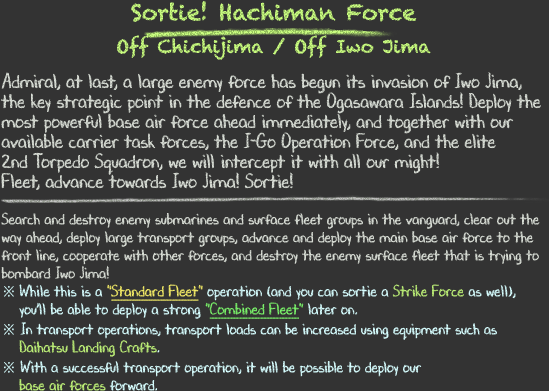
<style>
.page{position:relative;width:549px;height:391px;background:#333333}
.page>*{position:absolute;margin:0}
.t1{font:18px/36px "Chalkduster"}
.t2{font:22px/36px "Chalkduster"}
.t3{font:20px/20px "DJBChalkItUp";color:#d9ded6;scale:0.9 1}
.t4{font:16px/18px "DJBChalkItUp";color:#d9ded6;scale:0.9 1}
.t5{font:16px/18px "TimesNewRomanPSMT";color:#d7feff;scale:0.9 1}
.t6{font:16px/18px "DJBChalkItUp";color:#d7feff;scale:0.9 1}
.t7{font:16px/18px "DJBChalkItUp";color:#f5ed68;scale:0.9 1}
.t8{font:16px/18px "DJBChalkItUp";color:#f5ed68;text-decoration:underline;scale:0.9 1}
.t9{font:16px/18px "DJBChalkItUp";color:#bdef78;scale:0.9 1}
.t10{font:16px/20px "DJBChalkItUp";color:#d7feff;scale:0.9 1}
.t11{font:16px/20px "DJBChalkItUp";color:#7bf26b;scale:0.9 1}
.t12{font:16px/20px "DJBChalkItUp";color:#7bf26b;text-decoration:underline;scale:0.9 1}
.t13{font:16px/20px "DJBChalkItUp";color:#bdef78;scale:0.9 1}
</style>
<div class="page">
<p class="t1" style="left:117px;top:1px;width:314px;height:59px;text-align:center"><span class="t2">Sortie! Hachiman Force<br></span>Off Chichijima / Off Iwo Jima</p>
<p class="t3" style="left:1px;top:72px;width:540px;height:319px">Admiral, at last, a large enemy force has begun its invasion of Iwo Jima,<br>the key strategic point in the defence of the Ogasawara Islands! Deploy the<br>most powerful base air force ahead immediately, and together with our<br>available carrier task forces, the I-Go Operation Force, and the elite<br>2nd Torpedo Squadron, we will intercept it with all our might!<br>Fleet, advance towards Iwo Jima! Sortie!<br><br><span class="t4">Search and destroy enemy submarines and surface fleet groups in the vanguard, clear out the<br>way ahead, deploy large transport groups, advance and deploy the main base air force to the<br>front line, cooperate with other forces, and destroy the enemy surface fleet that is trying to<br>bombard Iwo Jima!<br></span><span class="t5">※ </span><span class="t6">While this is a </span><span class="t7">"</span><span class="t8">Standard Fleet</span><span class="t7">"</span><span class="t6"> operation (and you can sortie a </span><span class="t9">Strike Force</span><span class="t6"> as well),<br>　 </span><span class="t10">you’ll be able to deploy a strong </span><span class="t11">"</span><span class="t12">Combined Fleet</span><span class="t11">" </span><span class="t10">later on.<br></span><span class="t5">※</span><span class="t6"> In transport operations, transport loads can be increased using equipment such as<br>　 </span><span class="t13">Daihatsu Landing Crafts</span><span class="t10">.<br></span><span class="t5">※</span><span class="t6"> With a successful transport operation, it will be possible to deploy our<br>　 </span><span class="t9">base air forces</span><span class="t6"> forward.</span></p>
</div>
